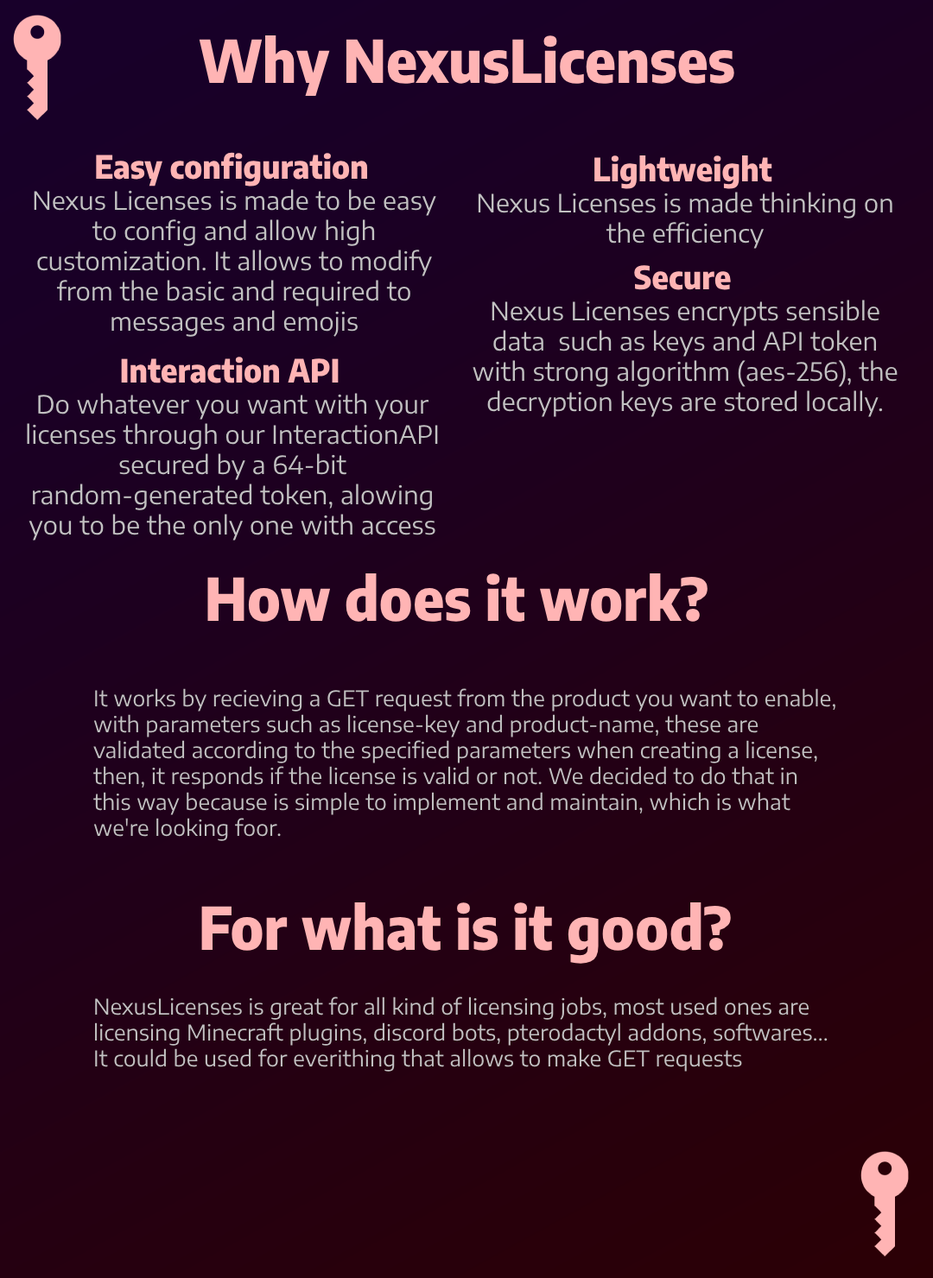
<style>
.page{position:relative;width:933px;height:1278px}
.page>*{position:absolute;margin:0}
.t1{font:58.7px "EncodeSansSemiCondensed-ExtraBold";color:#ffb4b4}
.t2{font:32px "EncodeSansSemiCondensed-ExtraBold";color:#ffb4b4}
.t3{font:25.1px "EncodeSansSemiExpanded-Regular";color:#c1c1c1}
.t4{font:21.6px "EncodeSansSemiExpanded-Regular";color:#c1c1c1}
</style>
<div class="page">
<p class="t1" style="left:199px;top:35px;width:535px;height:61px">Why NexusLicenses</p>
<p class="t2" style="left:96px;top:152px;width:272px;height:35px">Easy configuration</p>
<p class="t2" style="left:594px;top:155px;width:178px;height:34px">Lightweight</p>
<p class="t3" style="left:34px;top:189px;width:402px;height:148px;text-align:center">Nexus Licenses is made to be easy to config and allow high customization. It allows to modify from the basic and required to messages and emojis</p>
<p class="t3" style="left:478px;top:192px;width:414px;height:57px;text-align:center">Nexus Licenses is made thinking on the efficiency</p>
<p class="t2" style="left:634px;top:265px;width:97px;height:25px">Secure</p>
<p class="t3" style="left:472px;top:300px;width:425px;height:117px;text-align:center">Nexus Licenses encrypts sensible data  such as keys and API token with strong algorithm (aes-256), the decryption keys are stored locally.</p>
<p class="t2" style="left:121px;top:357px;width:218px;height:26px">Interaction API</p>
<p class="t3" style="left:27px;top:393px;width:411px;height:148px;text-align:center">Do whatever you want with your licenses through our InteractionAPI secured by a 64-bit random-generated token, alowing you to be the only one with access</p>
<p class="t1" style="left:207px;top:574px;width:500px;height:48px">How does it work?</p>
<p class="t4" style="left:93px;top:688px;width:742px;height:153px">It works by recieving a GET request from the product you want to enable, with parameters such as license-key and product-name, these are validated according to the specified parameters when creating a license, then, it responds if the license is valid or not. We decided to do that in this way because is simple to implement and maintain, which is what we're looking foor.</p>
<p class="t1" style="left:201px;top:903px;width:530px;height:61px">For what is it good?</p>
<p class="t4" style="left:95px;top:997px;width:732px;height:75px">NexusLicenses is great for all kind of licensing jobs, most used ones are licensing Minecraft plugins, discord bots, pterodactyl addons, softwares... It could be used for everithing that allows to make GET requests</p>
</div>
